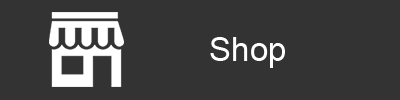
<style>
.page{position:relative;width:400px;height:100px;background:#333333}
.page>*{position:absolute;margin:0}
.t1{font:33.3px "ArialMT";color:#ffffff}
</style>
<div class="page">
<p class="t1" style="left:210px;top:37px;width:75px;height:31px">Shop</p>
</div>
